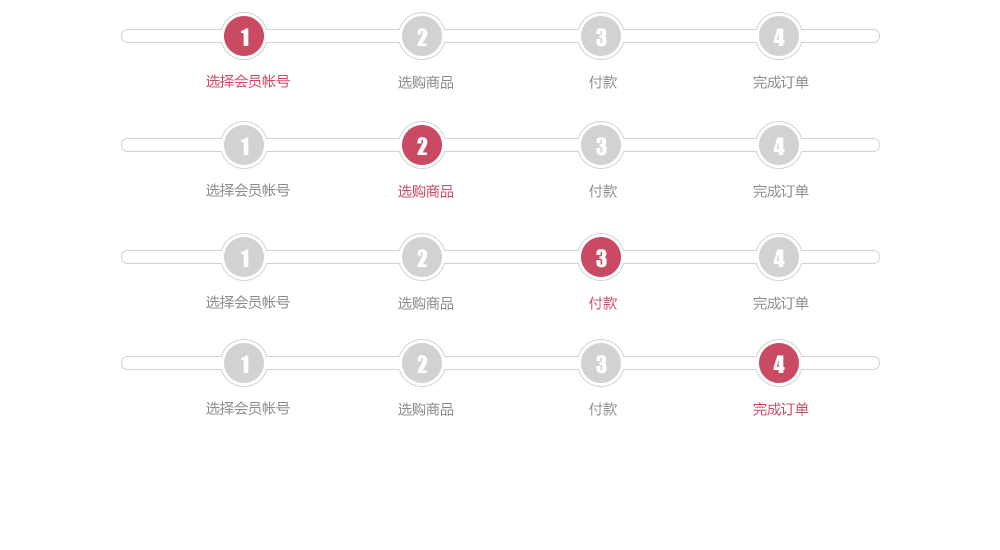
<style>
.page{position:relative;width:1000px;height:550px;background:#ffffff}
.page>*{position:absolute;margin:0}
.t1{font:22px "Impact";color:#ffffff}
.t2{font:14px "MicrosoftYaHei";color:#ca4a63}
.t3{font:14px "MicrosoftYaHei";color:#8b8b8b}
</style>
<div class="page">
<p class="t1" style="left:241px;top:28px;width:8px;height:18px">1</p>
<p class="t1" style="left:417px;top:28px;width:11px;height:18px">2</p>
<p class="t1" style="left:596px;top:28px;width:11px;height:19px">3</p>
<p class="t1" style="left:773px;top:28px;width:12px;height:18px">4</p>
<p class="t2" style="left:206px;top:74px;width:84px;height:14px">选择会员帐号</p>
<p class="t3" style="left:398px;top:75px;width:55px;height:14px">选购商品</p>
<p class="t3" style="left:589px;top:75px;width:28px;height:14px">付款</p>
<p class="t3" style="left:753px;top:75px;width:56px;height:14px">完成订单</p>
<p class="t1" style="left:241px;top:137px;width:8px;height:18px">1</p>
<p class="t1" style="left:417px;top:137px;width:11px;height:18px">2</p>
<p class="t1" style="left:596px;top:137px;width:11px;height:19px">3</p>
<p class="t1" style="left:773px;top:137px;width:12px;height:18px">4</p>
<p class="t3" style="left:206px;top:183px;width:84px;height:14px">选择会员帐号</p>
<p class="t2" style="left:398px;top:184px;width:55px;height:14px">选购商品</p>
<p class="t3" style="left:589px;top:184px;width:28px;height:14px">付款</p>
<p class="t3" style="left:753px;top:184px;width:56px;height:14px">完成订单</p>
<p class="t1" style="left:241px;top:249px;width:8px;height:18px">1</p>
<p class="t1" style="left:417px;top:249px;width:11px;height:18px">2</p>
<p class="t1" style="left:596px;top:249px;width:11px;height:19px">3</p>
<p class="t1" style="left:773px;top:249px;width:12px;height:18px">4</p>
<p class="t3" style="left:206px;top:295px;width:84px;height:14px">选择会员帐号</p>
<p class="t3" style="left:398px;top:296px;width:55px;height:14px">选购商品</p>
<p class="t2" style="left:589px;top:296px;width:28px;height:14px">付款</p>
<p class="t3" style="left:753px;top:296px;width:56px;height:14px">完成订单</p>
<p class="t1" style="left:241px;top:355px;width:8px;height:18px">1</p>
<p class="t1" style="left:417px;top:355px;width:11px;height:18px">2</p>
<p class="t1" style="left:596px;top:355px;width:11px;height:19px">3</p>
<p class="t1" style="left:773px;top:355px;width:12px;height:18px">4</p>
<p class="t3" style="left:206px;top:401px;width:84px;height:14px">选择会员帐号</p>
<p class="t3" style="left:398px;top:402px;width:55px;height:14px">选购商品</p>
<p class="t3" style="left:589px;top:402px;width:28px;height:14px">付款</p>
<p class="t2" style="left:753px;top:402px;width:56px;height:14px">完成订单</p>
</div>
